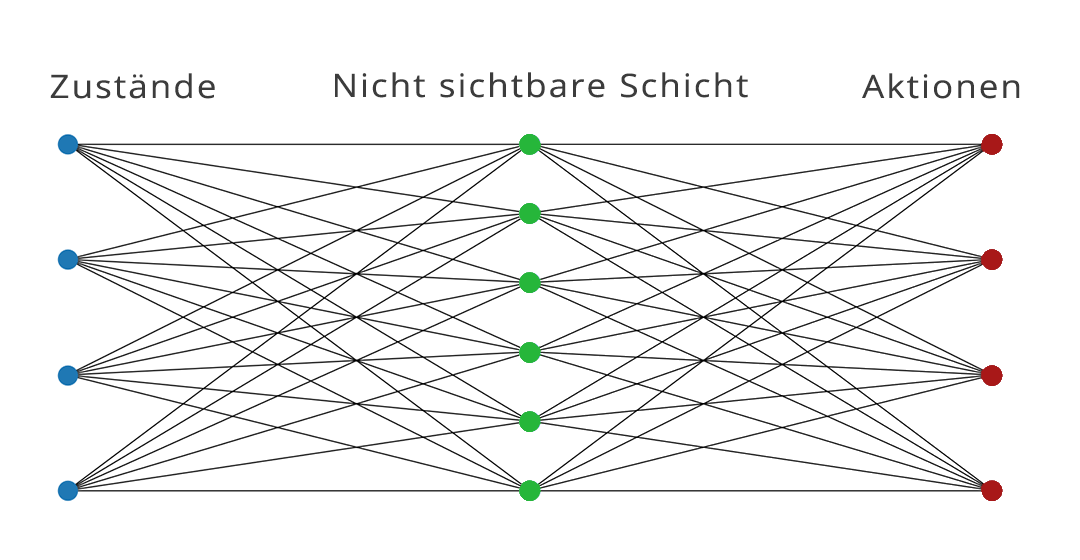
<style>
.page{position:relative;width:1080px;height:560px;background:#ffffff}
.page>*{position:absolute;margin:0}
.t1{font:32.4px "OpenSans-Regular";letter-spacing:0.06em;color:#3c3c3c;scale:1.08 1}
</style>
<div class="page">
<p class="t1" style="left:50px;top:73px;width:165px;height:26px">Zustände</p>
<p class="t1" style="left:335px;top:72px;width:413px;height:26px">Nicht sichtbare Schicht</p>
<p class="t1" style="left:862px;top:73px;width:158px;height:26px">Aktionen</p>
</div>
